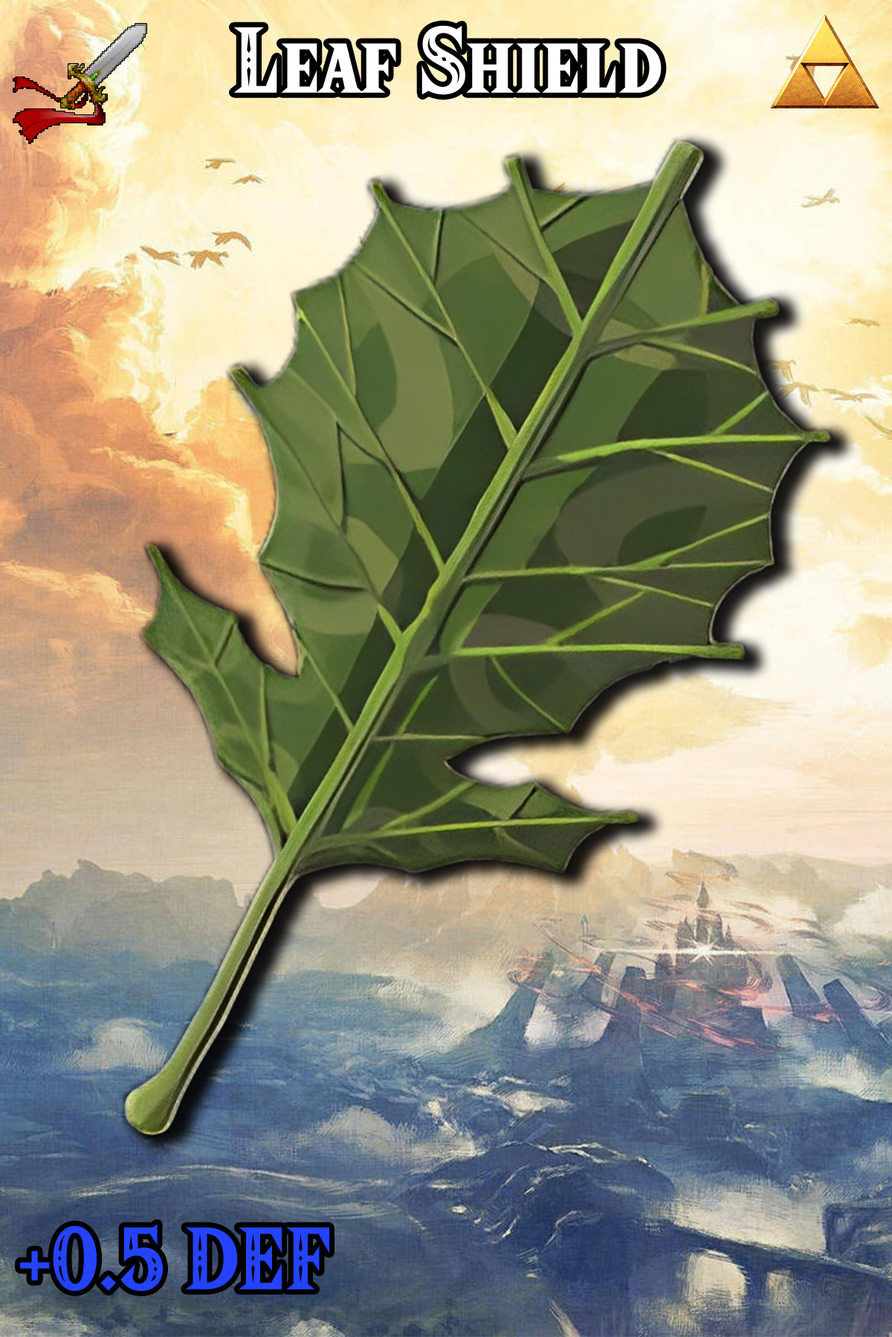
<style>
.page{position:relative;width:892px;height:1337px}
.page>*{position:absolute;margin:0}
.t1{font:139.7px "HyliaSerifBeta-Regular";color:#ffffff}
.t2{font:132.3px "HyliaSerifBeta-Regular";color:#2443ff}
</style>
<div class="page">
<p class="t1" style="left:233px;top:25px;width:428px;height:70px">Leaf Shield</p>
<p class="t2" style="left:20px;top:1224px;width:309px;height:67px">+0.5 DEF</p>
</div>
